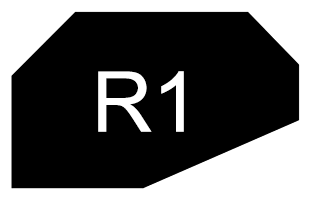
<style>
.page{position:relative;width:311px;height:200px;background:#000000}
.page>*{position:absolute;margin:0}
.t1{font:83.8px "ArialMT";color:#ffffff}
</style>
<div class="page">
<p class="t1" style="left:98px;top:71px;width:86px;height:61px">R1</p>
</div>
